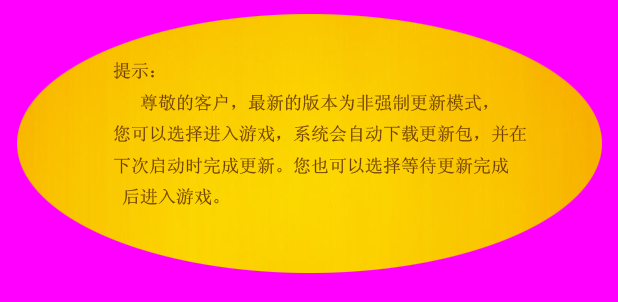
<style>
.page{position:relative;width:618px;height:302px;background:#ff00ff}
.page>*{position:absolute;margin:0}
.t1{font:18px "SimSun";color:#6e3f03}
</style>
<div class="page">
<p class="t1" style="left:113px;top:62px;width:413px;height:143px">提示：<br>   尊敬的客户，最新的版本为非强制更新模式，<br>您可以选择进入游戏，系统会自动下载更新包，并在<br>下次启动时完成更新。您也可以选择等待更新完成<br> 后进入游戏。</p>
</div>
